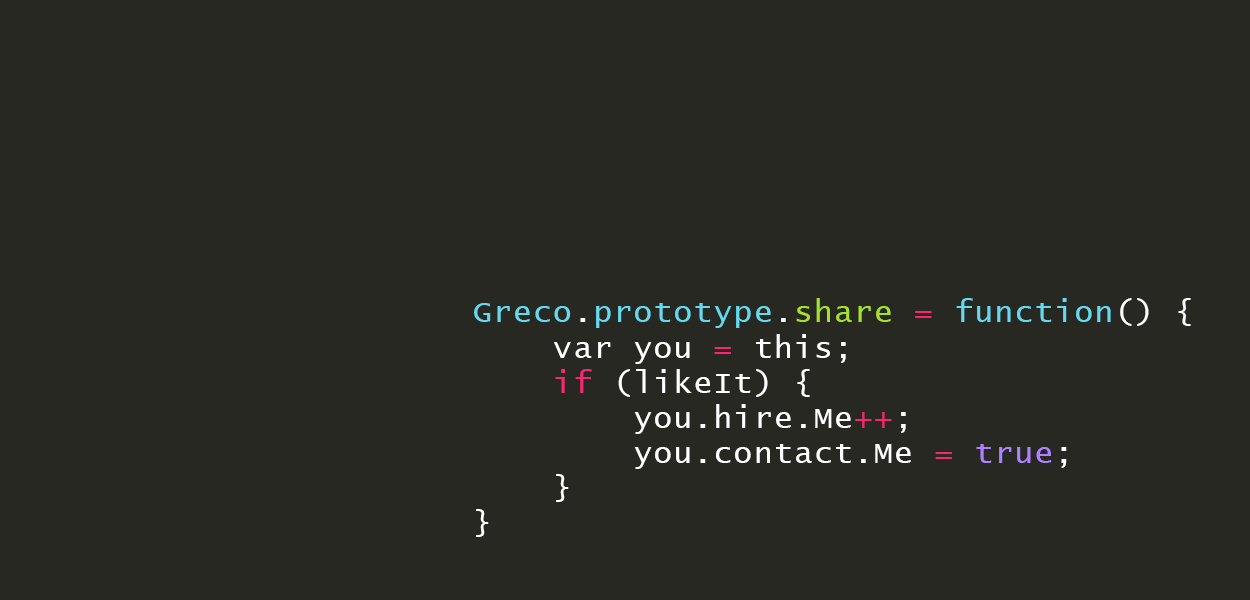
<style>
.page{position:relative;width:1250px;height:600px;background:#272822}
.page>*{position:absolute;margin:0}
.t1{font:31.3px/35.2px "LucidaConsole";letter-spacing:0.04em;color:#ffffff}
.t2{font:31.3px/35.2px "LucidaConsole";letter-spacing:0.04em;color:#66d9ef}
.t3{font:31.3px/35.2px "LucidaConsole";letter-spacing:0.04em;color:#a6e22c}
.t4{font:31.3px/35.2px "LucidaConsole";letter-spacing:0.04em;color:#f92672}
.t5{font:31.3px/35.2px "LucidaConsole";letter-spacing:0.04em;color:#ae81ff}
</style>
<div class="page">
<p class="t1" style="left:474px;top:298px;width:717px;height:239px"><span class="t2">Greco</span>.<span class="t2">prototype</span>.<span class="t3">share </span><span class="t4">=</span><span class="t2"> function</span>() {<br>    var you <span class="t4">= </span>this;<br>    <span class="t4">if </span>(likeIt) {<br>        you.hire.Me<span class="t4">++</span>;<br>        you.contact.Me <span class="t4">= </span><span class="t5">true</span>;<br>    } <br>}</p>
</div>
